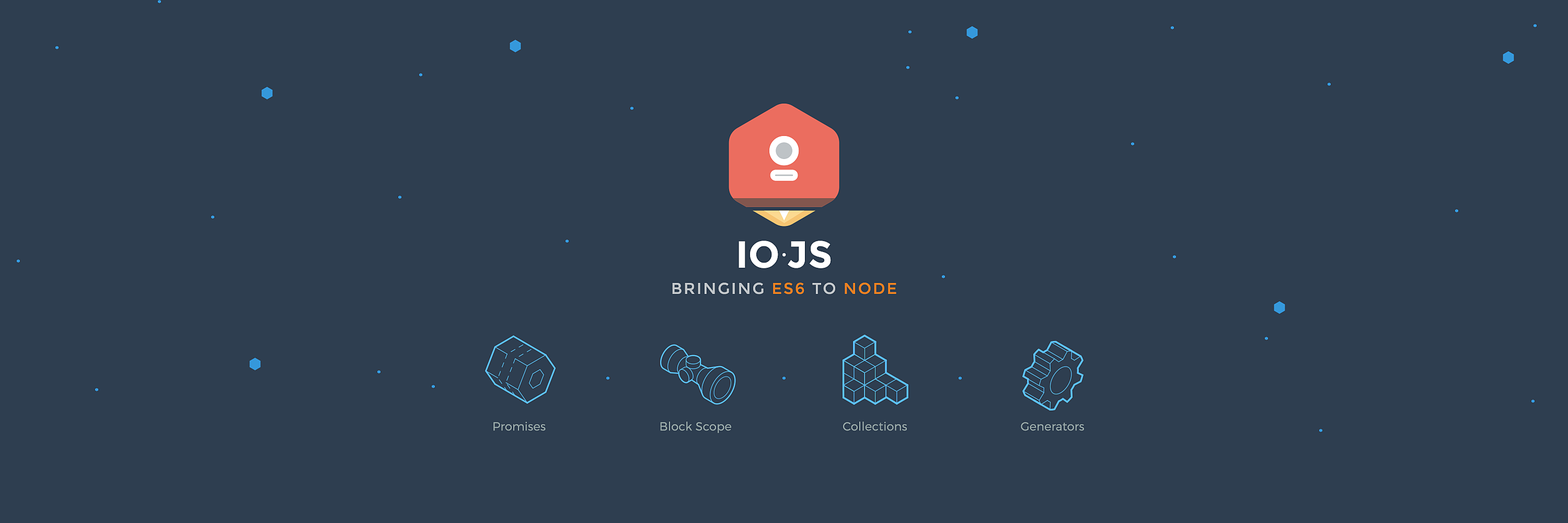
<style>
.page{position:relative;width:1568px;height:523px;background:#2e3e50}
.page>*{position:absolute;margin:0}
.t1{font:37.6px "Montserrat-Bold";letter-spacing:0.01em;color:#ffffff;text-transform:uppercase}
.t2{font:18.8px "Montserrat-Bold";letter-spacing:0.01em;color:#ffffff;text-transform:uppercase}
.t3{font:15.7px "Montserrat-Regular";letter-spacing:0.1em;color:#bec3c7;text-transform:uppercase}
.t4{font:15.7px "Montserrat-Regular";letter-spacing:0.1em;color:#e67f22;text-transform:uppercase}
.t5{font:11.8px "Montserrat-Light";letter-spacing:0.01em;color:#95a5a5}
</style>
<div class="page">
<p class="t1" style="left:739px;top:240px;width:92px;height:28px">io<span class="t2">.</span>js</p>
<p class="t3" style="left:672px;top:282px;width:224px;height:12px">bringing <span class="t4">es6</span> to <span class="t4">node</span></p>
<p class="t5" style="left:493px;top:421px;width:53px;height:10px">Promises</p>
<p class="t5" style="left:660px;top:421px;width:71px;height:12px">Block Scope</p>
<p class="t5" style="left:843px;top:421px;width:64px;height:10px">Collections</p>
<p class="t5" style="left:1021px;top:422px;width:63px;height:9px">Generators</p>
</div>
